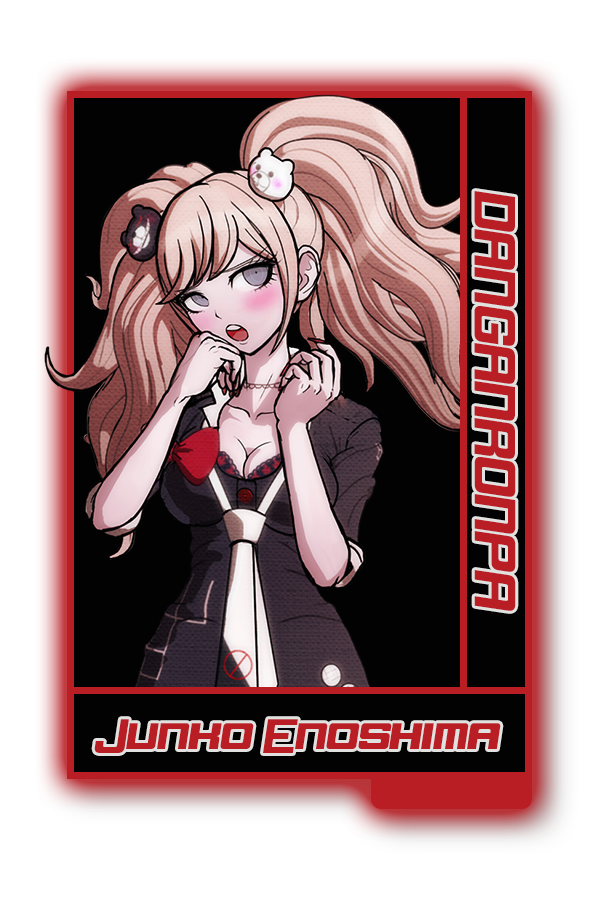
<style>
.page{position:relative;width:600px;height:900px;background:#020202}
.page>*{position:absolute;margin:0}
.t1{font:48.8px "DorBlue";color:#bb2c2e}
.t2{font:40.6px "DorBlue";color:#bb2c2e}
</style>
<div class="page">
<p class="t1" style="left:474px;top:191px;width:42px;height:420px;rotate:90deg">DANGANRONPA</p>
<p class="t2" style="left:94px;top:719px;width:407px;height:34px">Junko Enoshima</p>
</div>
